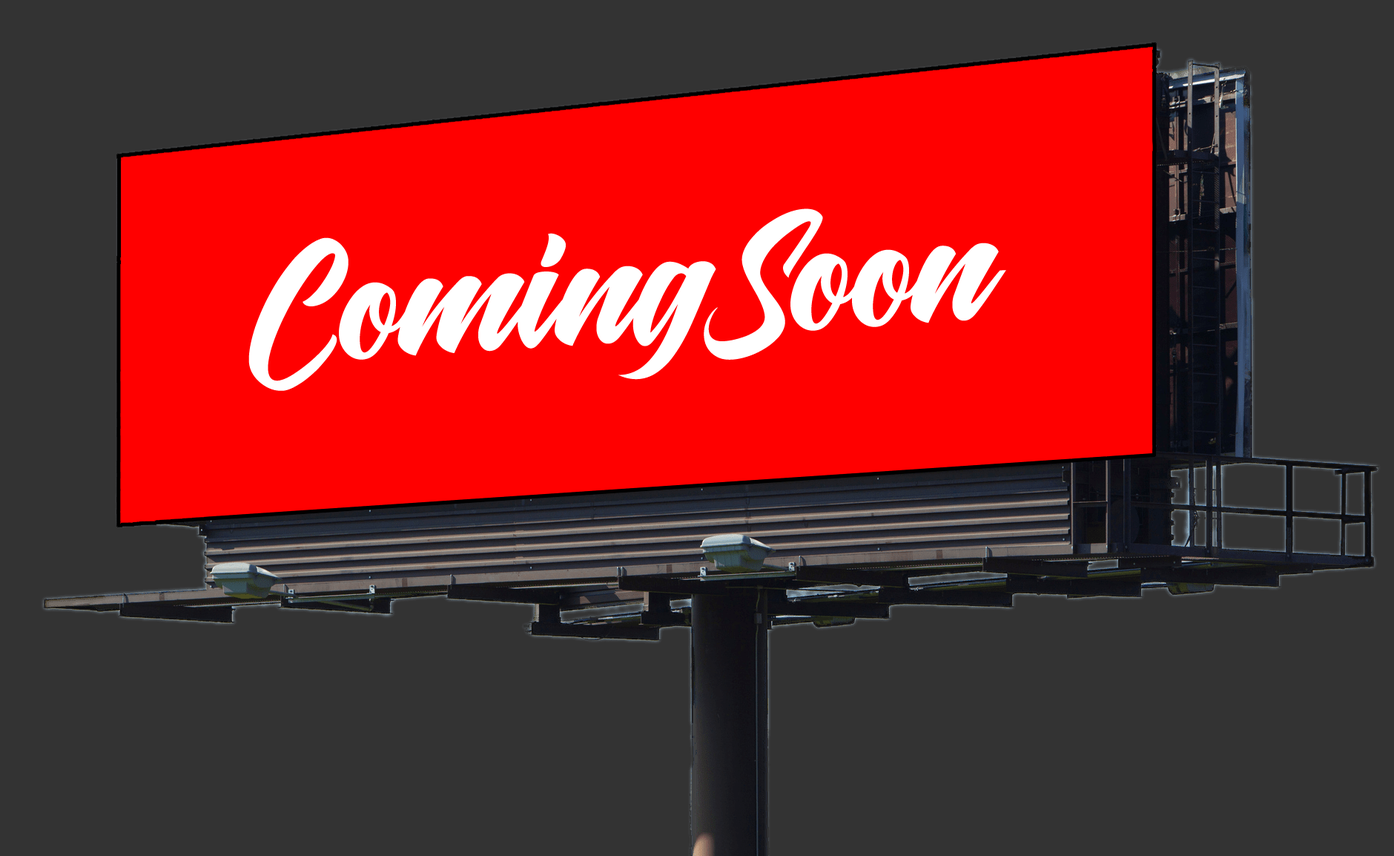
<style>
.page{position:relative;width:1394px;height:856px;background:#333333}
.page>*{position:absolute;margin:0}
.t1{font:222.4px "Maghrib";letter-spacing:-0.005em;color:#ffffff}
</style>
<div class="page">
<p class="t1" style="left:248px;top:208px;width:758px;height:183px;rotate:-4deg">ComingSoon</p>
</div>
